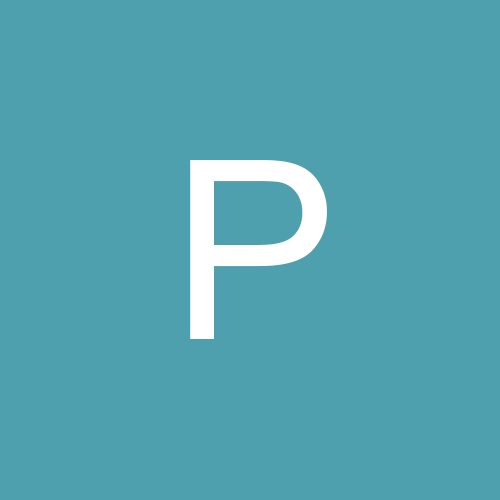
<style>
.page{position:relative;width:500px;height:500px;background:#4ea0ae}
.page>*{position:absolute;margin:0}
.t1{font:250px "ArialMT";color:#ffffff}
</style>
<div class="page">
<p class="t1" style="left:190px;top:160px;width:137px;height:179px">P</p>
</div>
